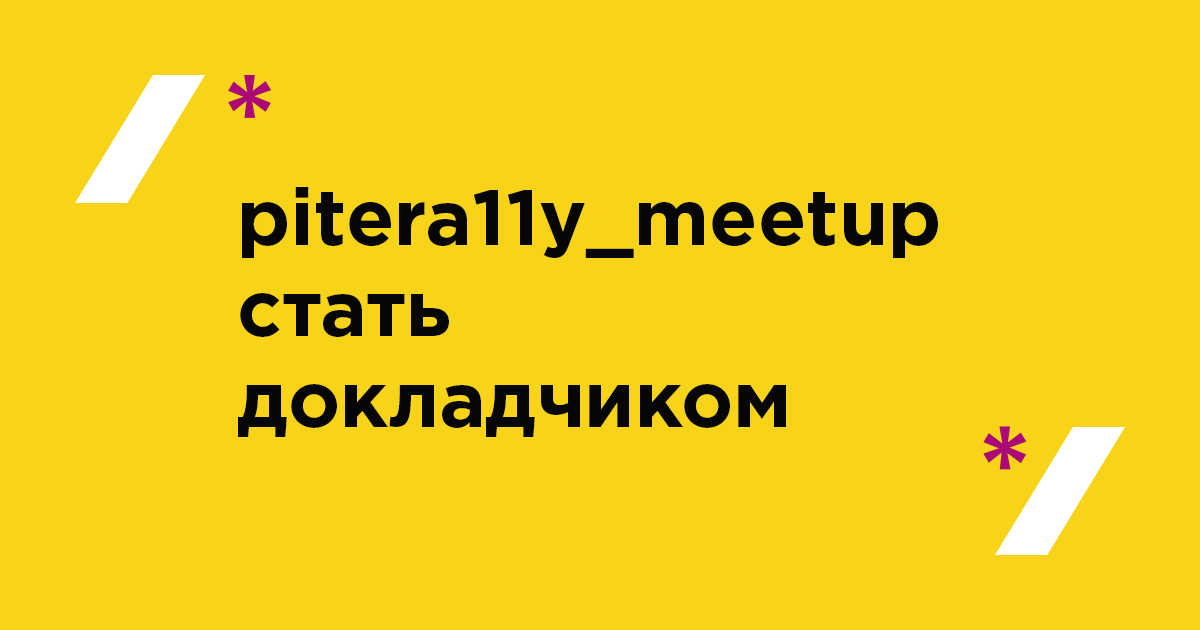
<style>
.page{position:relative;width:1200px;height:630px;background:#f7d419}
.page>*{position:absolute;margin:0}
.t1{font:79px/91px "GothamPro-Bold";color:#060606}
</style>
<div class="page">
<p class="t1" style="left:238px;top:187px;width:700px;height:250px">pitera11y_meetup<br>стать<br>докладчиком</p>
</div>
